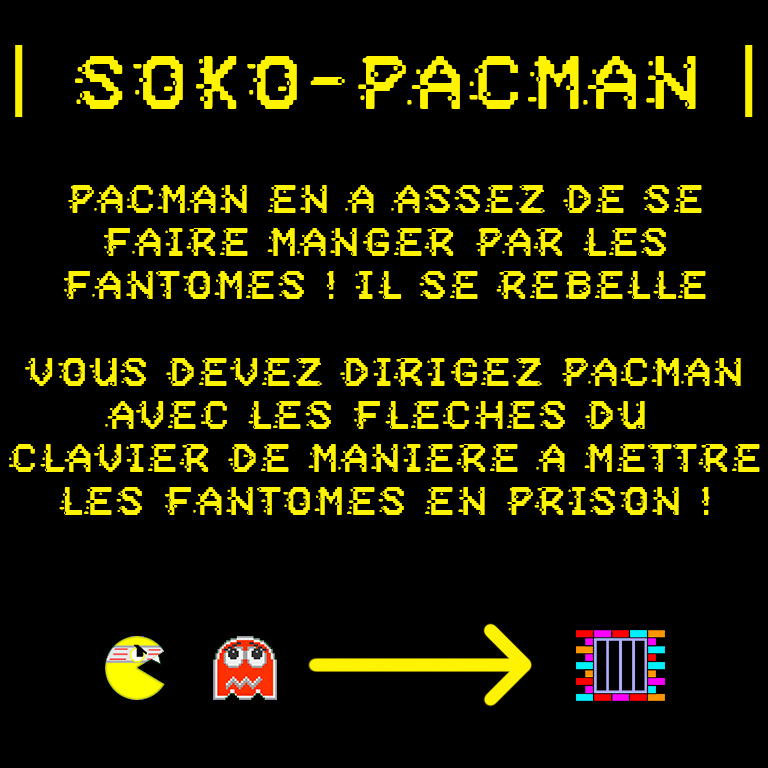
<style>
.page{position:relative;width:768px;height:768px;background:#000000}
.page>*{position:absolute;margin:0}
.t1{font:76.2px "PositiveSystem";letter-spacing:0.2em;color:#fff300;scale:0.89 1}
.t2{font:76.2px "Geometos";letter-spacing:0.2em;color:#fff300;scale:0.89 1}
.t3{font:40.3px "PositiveSystem";letter-spacing:0.2em;color:#fff300;scale:0.89 1}
</style>
<div class="page">
<p class="t1" style="left:15px;top:45px;width:738px;height:72px"><span class="t2">| </span>SOKO-PACMAN <span class="t2">|</span></p>
<p class="t3" style="left:9px;top:185px;width:751px;height:330px;text-align:center">Pacman en a assez de se<br>faire manger par les<br>fantômes ! Il se rebelle<br><br>Vous devez dirigez pacman<br>avec les flèches du <br>clavier de manière à mettre<br>les fantomes en prison !</p>
</div>
